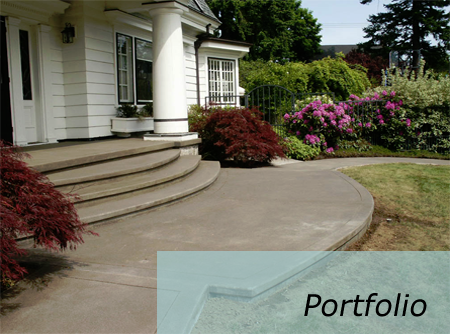
<style>
.page{position:relative;width:450px;height:334px}
.page>*{position:absolute;margin:0}
.t1{font:30px "Verdana";color:#000000;font-style:italic}
</style>
<div class="page">
<p class="t1" style="left:304px;top:293px;width:123px;height:24px">Portfolio</p>
</div>
